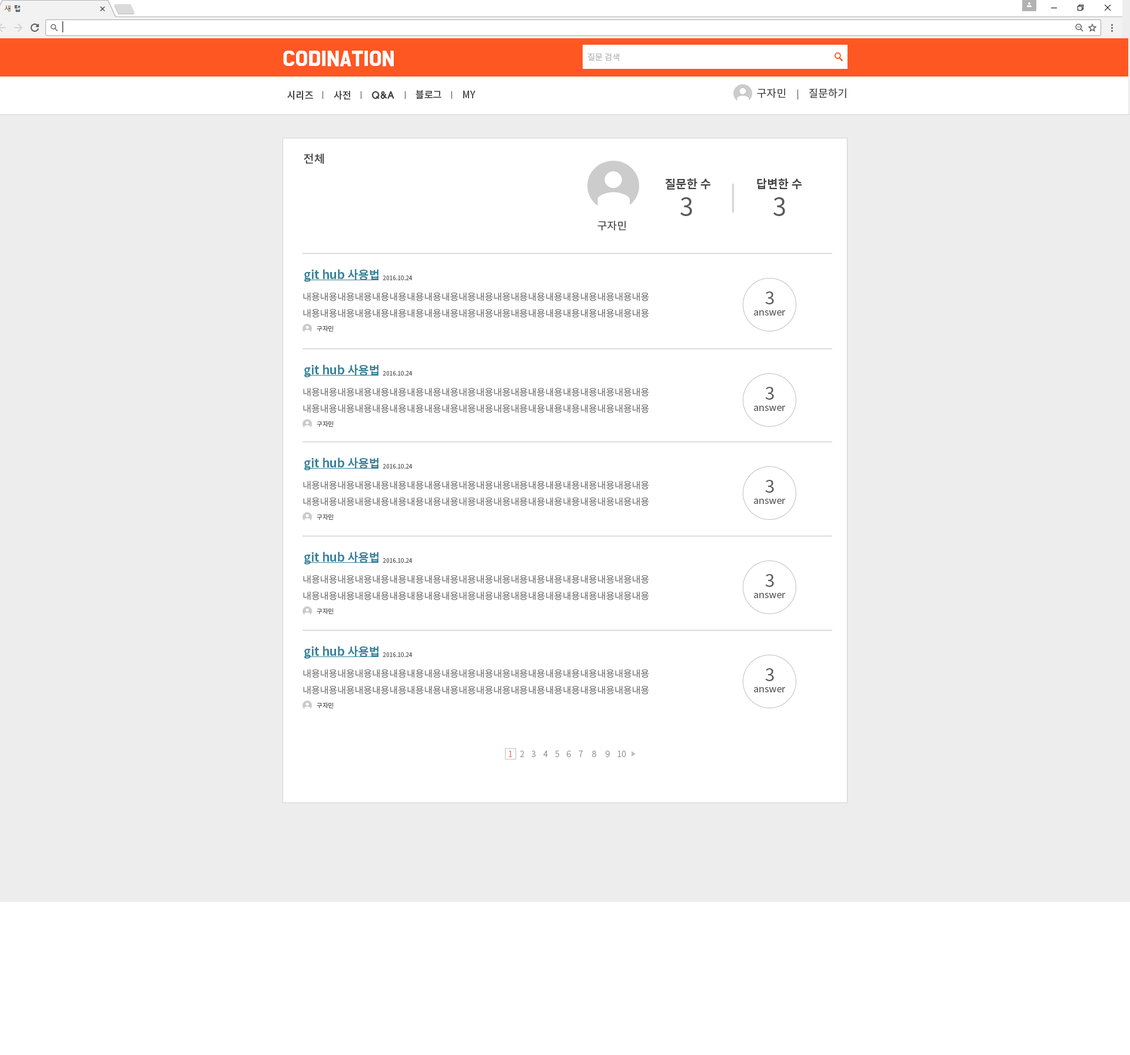
<style>
.page{position:relative;width:1130px;height:1055px;background:#ffffff}
.page>*{position:absolute;margin:0}
.t1{font:17.7px "BMDoHyeon";color:#ffffff;font-weight:bold}
.t2{font:8.2px "NotoSansCJKkr-DemiLight";color:#b5b5b5}
.t3{font:10.6px "NotoSansCJKkr-Regular";color:#424242}
.t4{font:9.8px "NotoSansCJKkr-Medium";letter-spacing:-0.01em;color:#424242}
.t5{font:9.8px "HYwulB";letter-spacing:-0.025em;color:#424242}
.t6{font:11.8px "NotoSansCJKkr-Medium";color:#424242}
.t7{font:11.8px "NotoSansCJKkr-Bold";color:#424242}
.t8{font:24.4px "NotoSansCJKkr-Regular";color:#595959}
.t9{font:11.8px "NotoSansCJKkr-Bold";color:#38829a}
.t10{font:5.9px "NotoSansCJKkr-Regular";color:#595959}
.t11{font:9.4px "NotoSansCJKkr-Regular";color:#757575}
.t12{font:17.7px "NotoSansCJKkr-Regular";color:#595959}
.t13{font:9.4px "NotoSansCJKkr-Regular";color:#595959}
.t14{font:6.1px "NotoSansCJKkr-Regular";color:#595959}
.t15{font:8.2px "NotoSansCJKkr-Light";color:#898989}
.t16{font:8.2px "NotoSansCJKkr-Light";color:#ff5b5b}
</style>
<div class="page">
<p class="t1" style="left:283px;top:51px;width:111px;height:16px">CODINATION</p>
<p class="t2" style="left:588px;top:53px;width:31px;height:8px">질문 검색</p>
<p class="t3" style="left:757px;top:88px;width:29px;height:10px">구자민</p>
<p class="t3" style="left:809px;top:88px;width:38px;height:10px">질문하기</p>
<p class="t4" style="left:287px;top:91px;width:26px;height:9px">시리즈</p>
<p class="t4" style="left:334px;top:91px;width:17px;height:9px">사전</p>
<p class="t5" style="left:371px;top:91px;width:23px;height:8px">Q&amp;A</p>
<p class="t4" style="left:416px;top:90px;width:26px;height:9px">블로그</p>
<p class="t4" style="left:463px;top:91px;width:13px;height:7px">MY</p>
<p class="t6" style="left:304px;top:153px;width:20px;height:11px">전체</p>
<p class="t7" style="left:665px;top:178px;width:46px;height:12px">질문한 수</p>
<p class="t7" style="left:757px;top:178px;width:45px;height:12px">답변한 수</p>
<p class="t8" style="left:681px;top:197px;width:11px;height:19px">3</p>
<p class="t8" style="left:774px;top:197px;width:11px;height:19px">3</p>
<p class="t3" style="left:598px;top:221px;width:28px;height:10px">구자민</p>
<p class="t9" style="left:304px;top:269px;width:75px;height:13px">git hub 사용법</p>
<p class="t10" style="left:383px;top:276px;width:30px;height:4px">2016.10.24</p>
<p class="t11" style="left:303px;top:292px;width:346px;height:26px">내용내용내용내용내용내용내용내용내용내용내용내용내용내용내용내용내용내용내용내용<br>내용내용내용내용내용내용내용내용내용내용내용내용내용내용내용내용내용내용내용내용</p>
<p class="t12" style="left:765px;top:291px;width:9px;height:13px">3</p>
<p class="t13" style="left:754px;top:310px;width:32px;height:6px">answer</p>
<p class="t14" style="left:317px;top:326px;width:17px;height:5px">구자민</p>
<p class="t9" style="left:304px;top:364px;width:75px;height:13px">git hub 사용법</p>
<p class="t10" style="left:383px;top:371px;width:30px;height:5px">2016.10.24</p>
<p class="t11" style="left:303px;top:387px;width:346px;height:26px">내용내용내용내용내용내용내용내용내용내용내용내용내용내용내용내용내용내용내용내용<br>내용내용내용내용내용내용내용내용내용내용내용내용내용내용내용내용내용내용내용내용</p>
<p class="t12" style="left:765px;top:387px;width:9px;height:13px">3</p>
<p class="t13" style="left:754px;top:406px;width:32px;height:5px">answer</p>
<p class="t14" style="left:317px;top:421px;width:17px;height:6px">구자민</p>
<p class="t9" style="left:304px;top:457px;width:75px;height:13px">git hub 사용법</p>
<p class="t10" style="left:383px;top:464px;width:30px;height:5px">2016.10.24</p>
<p class="t11" style="left:303px;top:480px;width:346px;height:26px">내용내용내용내용내용내용내용내용내용내용내용내용내용내용내용내용내용내용내용내용<br>내용내용내용내용내용내용내용내용내용내용내용내용내용내용내용내용내용내용내용내용</p>
<p class="t12" style="left:765px;top:480px;width:9px;height:13px">3</p>
<p class="t13" style="left:754px;top:499px;width:32px;height:5px">answer</p>
<p class="t14" style="left:317px;top:514px;width:17px;height:6px">구자민</p>
<p class="t9" style="left:304px;top:552px;width:75px;height:13px">git hub 사용법</p>
<p class="t10" style="left:383px;top:558px;width:30px;height:5px">2016.10.24</p>
<p class="t11" style="left:303px;top:575px;width:346px;height:25px">내용내용내용내용내용내용내용내용내용내용내용내용내용내용내용내용내용내용내용내용<br>내용내용내용내용내용내용내용내용내용내용내용내용내용내용내용내용내용내용내용내용</p>
<p class="t12" style="left:765px;top:574px;width:9px;height:13px">3</p>
<p class="t13" style="left:754px;top:593px;width:32px;height:5px">answer</p>
<p class="t14" style="left:317px;top:608px;width:17px;height:6px">구자민</p>
<p class="t9" style="left:304px;top:646px;width:75px;height:13px">git hub 사용법</p>
<p class="t10" style="left:383px;top:652px;width:30px;height:5px">2016.10.24</p>
<p class="t11" style="left:303px;top:669px;width:346px;height:26px">내용내용내용내용내용내용내용내용내용내용내용내용내용내용내용내용내용내용내용내용<br>내용내용내용내용내용내용내용내용내용내용내용내용내용내용내용내용내용내용내용내용</p>
<p class="t12" style="left:765px;top:668px;width:9px;height:13px">3</p>
<p class="t13" style="left:754px;top:687px;width:32px;height:5px">answer</p>
<p class="t14" style="left:317px;top:702px;width:17px;height:6px">구자민</p>
<p class="t15" style="left:509px;top:751px;width:117px;height:6px"><span class="t16">1 </span>   2    3    4    5    6    7     8     9    10</p>
</div>
